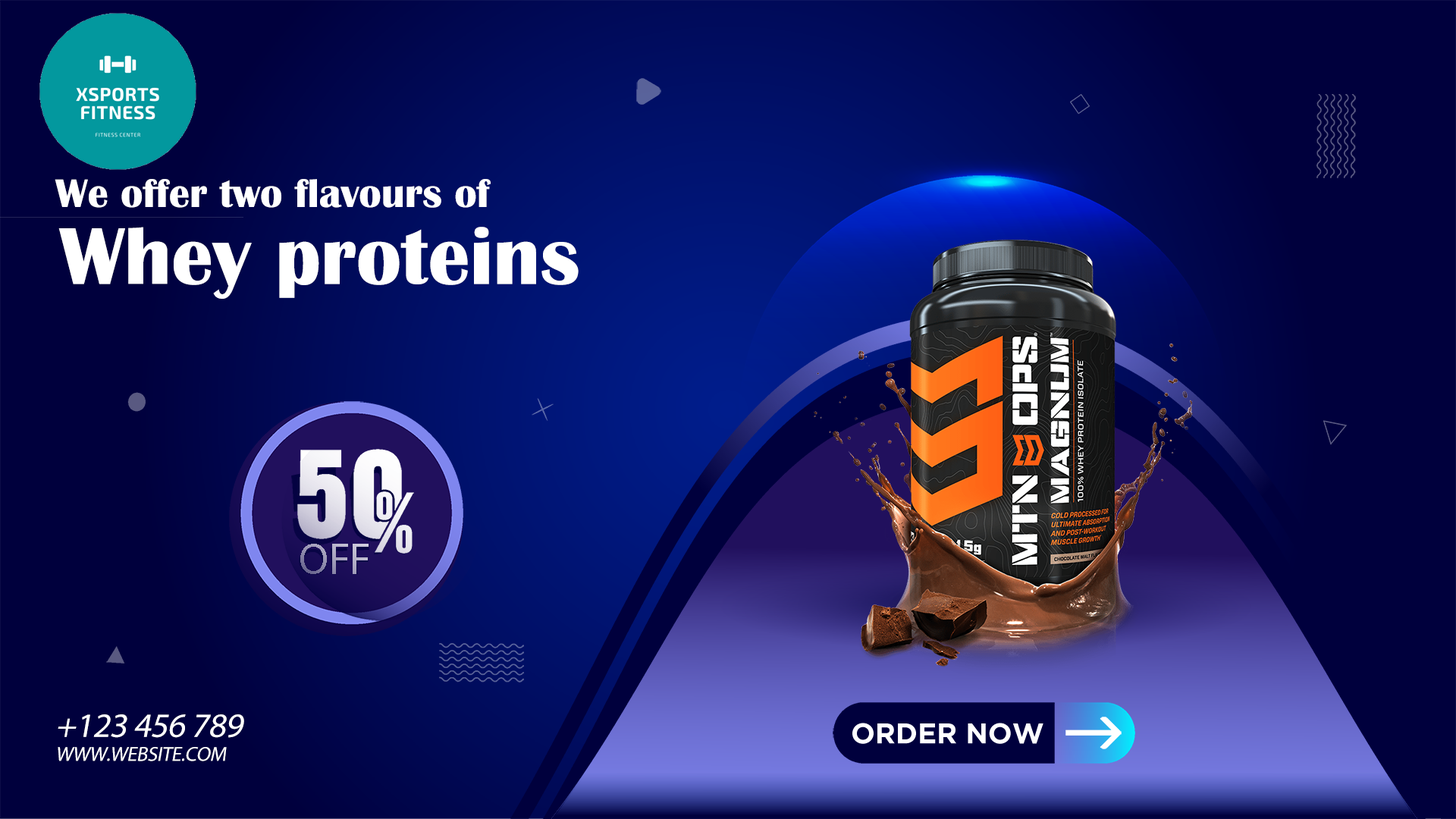
<style>
.page{position:relative;width:1456px;height:819px;background:#00003d}
.page>*{position:absolute;margin:0}
.t1{font:41.3px "BritannicBold";color:#ffffff}
.t2{font:83.3px "BritannicBold";color:#ffffff}
.t3{font:43.7px "MyriadPro-Regular"}
.t4{font:34.2px "MyriadPro-Regular";letter-spacing:-0.015em;color:#ffffff;font-style:italic}
.t5{font:28.4px "Gotham-Bold";color:#ffffff}
.t6{font:20.3px "MyriadPro-Regular";letter-spacing:-0.015em;color:#ffffff;text-transform:uppercase;font-style:italic}
</style>
<div class="page">
<p class="t1" style="left:55px;top:179px;width:436px;height:29px">We offer two flavours of</p>
<p class="t2" style="left:58px;top:227px;width:521px;height:72px">Whey proteins</p>
<p class="t3" style="left:300px;top:544px;width:69px;height:30px">OFF</p>
<p class="t4" style="left:58px;top:714px;width:186px;height:24px">+123 456 789</p>
<p class="t5" style="left:852px;top:723px;width:191px;height:21px">ORDER NOW</p>
<p class="t6" style="left:58px;top:747px;width:169px;height:14px">www.website.com</p>
</div>
